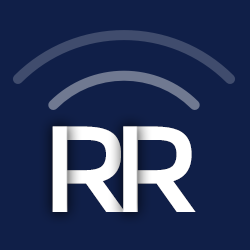
<style>
.page{position:relative;width:250px;height:250px;background:#101f48}
.page>*{position:absolute;margin:0}
.t1{font:122px "Montserrat-Regular";letter-spacing:-0.15em;color:#ffffff;text-transform:uppercase}
</style>
<div class="page">
<p class="t1" style="left:52px;top:126px;width:144px;height:86px">RR</p>
</div>
